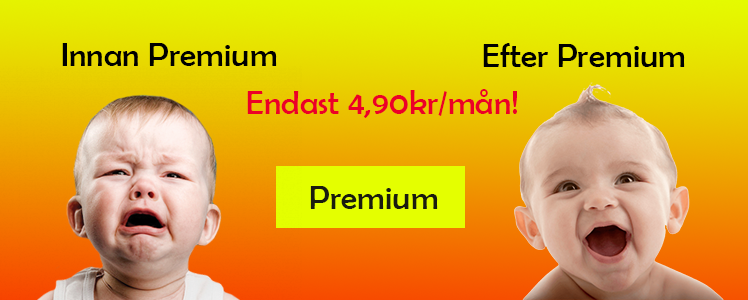
<style>
.page{position:relative;width:748px;height:300px}
.page>*{position:absolute;margin:0}
.t1{font:33.3px "BerlinSansFB-Reg";color:#000000}
.t2{font:33.3px "BerlinSansFB-Reg";color:#ec0027}
.t3{font:33.3px "BerlinSansFB-Reg";color:#1a1b0f}
</style>
<div class="page">
<p class="t1" style="left:62px;top:43px;width:215px;height:23px">Innan Premium</p>
<p class="t1" style="left:483px;top:43px;width:202px;height:24px">Efter Premium</p>
<p class="t2" style="left:247px;top:89px;width:270px;height:29px">Endast 4,90kr/mån!</p>
<p class="t3" style="left:310px;top:186px;width:128px;height:23px">Premium</p>
</div>
